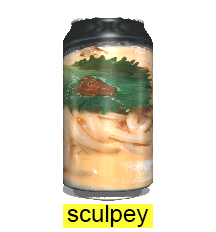
<style>
.page{position:relative;width:216px;height:232px;background:#ffffff}
.page>*{position:absolute;margin:0}
.t1{font:24px "ArialMT";color:#000000}
</style>
<div class="page">
<p class="t1" style="left:67px;top:205px;width:82px;height:22px">sculpey</p>
</div>
